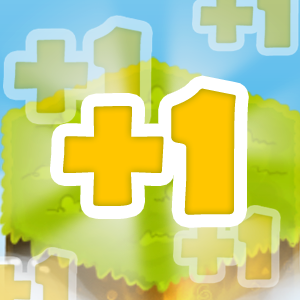
<style>
.page{position:relative;width:300px;height:300px}
.page>*{position:absolute;margin:0}
.t1{font:200px "BerlinSansFB-Bold";color:#ffc600}
</style>
<div class="page">
<p class="t1" style="left:63px;top:88px;width:173px;height:127px">+1</p>
</div>
